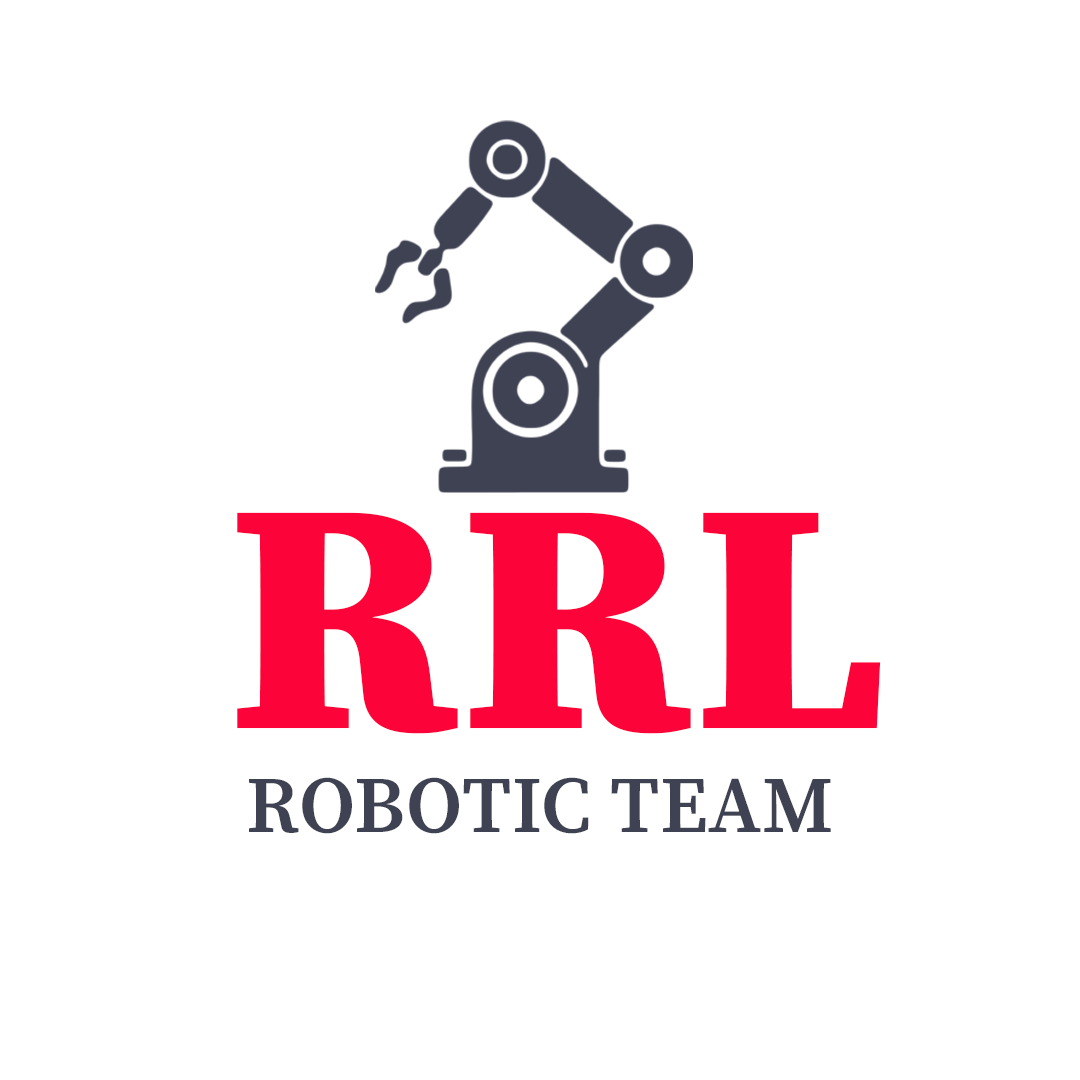
<style>
.page{position:relative;width:1080px;height:1080px;background:#ffffff}
.page>*{position:absolute;margin:0}
.t1{font:330px "SourceSerifRoman-Black";letter-spacing:0.01em;color:#fc0339}
.t2{font:79.8px "SourceSerifRoman-Semibold";letter-spacing:0.01em;color:#3f4253}
</style>
<div class="page">
<p class="t1" style="left:237px;top:512px;width:644px;height:222px">RRL</p>
<p class="t2" style="left:249px;top:777px;width:582px;height:57px">ROBOTIC TEAM</p>
</div>
